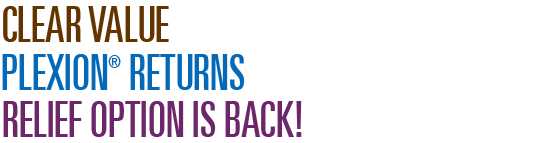
<style>
.page{position:relative;width:560px;height:143px;background:#ffffff}
.page>*{position:absolute;margin:0}
.t1{font:50px "UniversLT-UltraCondensed";color:#633400;scale:0.88 1}
.t2{font:50px "UniversLT-UltraCondensed";color:#0569b7;scale:0.88 1}
.t3{font:18px "UniversLT-UltraCondensed";color:#0569b7;scale:0.88 1}
.t4{font:50px "UniversLT-UltraCondensed";color:#6c276a;scale:0.88 1}
</style>
<div class="page">
<p class="t1" style="left:3px;top:6px;width:166px;height:36px">CLEAR VALUE</p>
<p class="t2" style="left:2px;top:54px;width:243px;height:36px">PLEXION<span class="t3">®</span> RETURNS</p>
<p class="t4" style="left:3px;top:101px;width:299px;height:36px">RELIEF OPTION IS BACK!</p>
</div>
